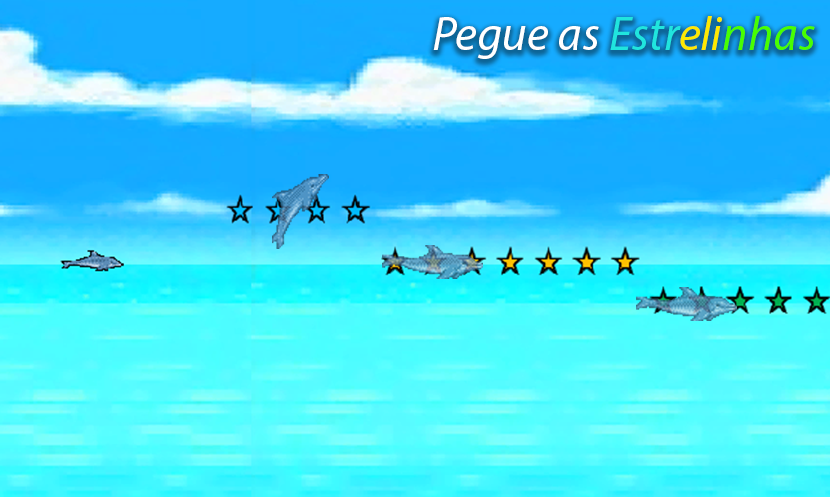
<style>
.page{position:relative;width:830px;height:497px}
.page>*{position:absolute;margin:0}
.t1{font:47.7px "MyriadPro-It";color:#ffffff}
.t2{font:47.7px "MyriadPro-It";color:#20e5de}
.t3{font:47.7px "MyriadPro-It";color:#fee900}
.t4{font:47.7px "MyriadPro-It";color:#48ff00}
</style>
<div class="page">
<p class="t1" style="left:433px;top:16px;width:382px;height:43px">Pegue as <span class="t2">Estr</span><span class="t3">eli</span><span class="t4">nhas</span></p>
</div>
